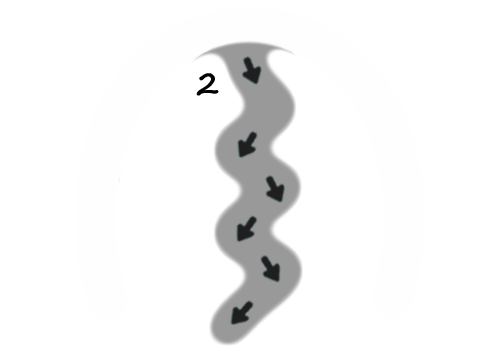
<style>
.page{position:relative;width:500px;height:350px;background:#ffffff}
.page>*{position:absolute;margin:0}
.t1{font:31.5px "SegoeScript-Bold";color:#020202}
</style>
<div class="page">
<p class="t1" style="left:196px;top:73px;width:23px;height:23px">2</p>
</div>
